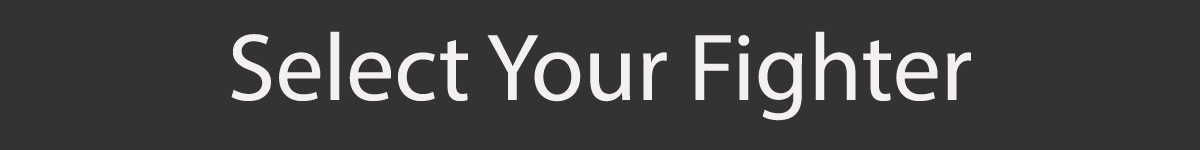
<style>
.page{position:relative;width:1200px;height:150px;background:#333333}
.page>*{position:absolute;margin:0}
.t1{font:96px "MyriadPro-Regular";color:#f4f0f0}
</style>
<div class="page">
<p class="t1" style="left:231px;top:31px;width:740px;height:90px">Select Your Fighter</p>
</div>
